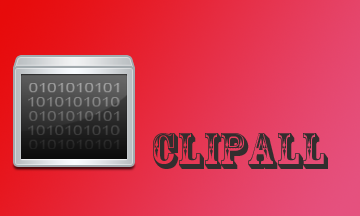
<style>
.page{position:relative;width:360px;height:216px}
.page>*{position:absolute;margin:0}
.t1{font:48px "RosewoodStd-Regular";color:#322e2e}
</style>
<div class="page">
<p class="t1" style="left:153px;top:133px;width:175px;height:36px">ClipAll</p>
</div>
